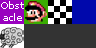
<style>
.page{position:relative;width:96px;height:48px;background:#333333}
.page>*{position:absolute;margin:0}
.t1{font:10px "Verdana";color:#ffffff}
</style>
<div class="page">
<p class="t1" style="left:1px;top:1px;width:23px;height:20px;text-align:center">Obst<br>acle</p>
</div>
